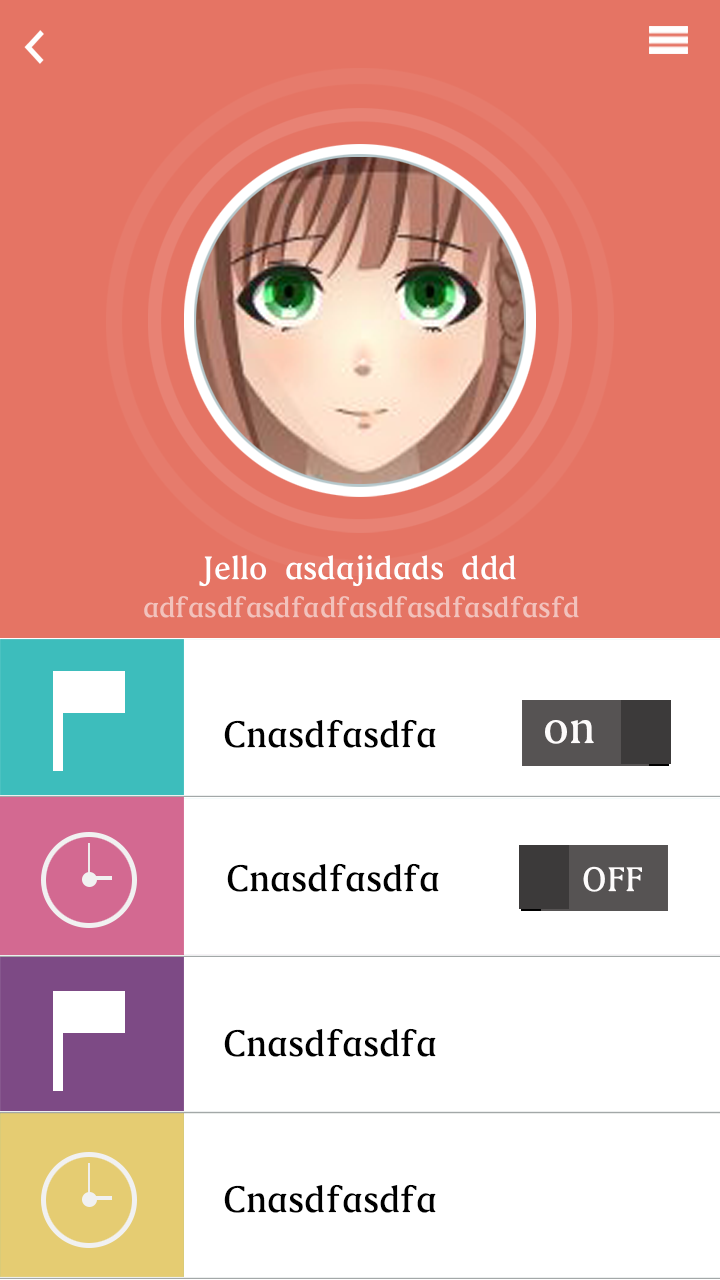
<style>
.page{position:relative;width:720px;height:1280px;background:#ffffff}
.page>*{position:absolute;margin:0}
.t1{font:34.1px "Weibei-SC-Bold";color:#ffffff}
.t2{font:30px "Weibei-SC-Bold";color:#f2c2bc}
.t3{font:39px "Weibei-SC-Bold";color:#000000}
.t4{font:48px "Weibei-SC-Bold";color:#fdfbfb}
.t5{font:36px "Weibei-SC-Bold";color:#fdfbfb}
</style>
<div class="page">
<p class="t1" style="left:199px;top:555px;width:317px;height:32px">Jello asdajidads ddd</p>
<p class="t2" style="left:144px;top:596px;width:435px;height:22px">adfasdfasdfadfasdfasdfasdfasfd</p>
<p class="t3" style="left:224px;top:719px;width:212px;height:29px">Cnasdfasdfa</p>
<p class="t4" style="left:545px;top:720px;width:49px;height:24px">on</p>
<p class="t3" style="left:227px;top:863px;width:212px;height:29px">Cnasdfasdfa</p>
<p class="t5" style="left:583px;top:866px;width:59px;height:26px">OFF</p>
<p class="t3" style="left:224px;top:1028px;width:212px;height:29px">Cnasdfasdfa</p>
<p class="t3" style="left:224px;top:1184px;width:212px;height:29px">Cnasdfasdfa</p>
</div>
